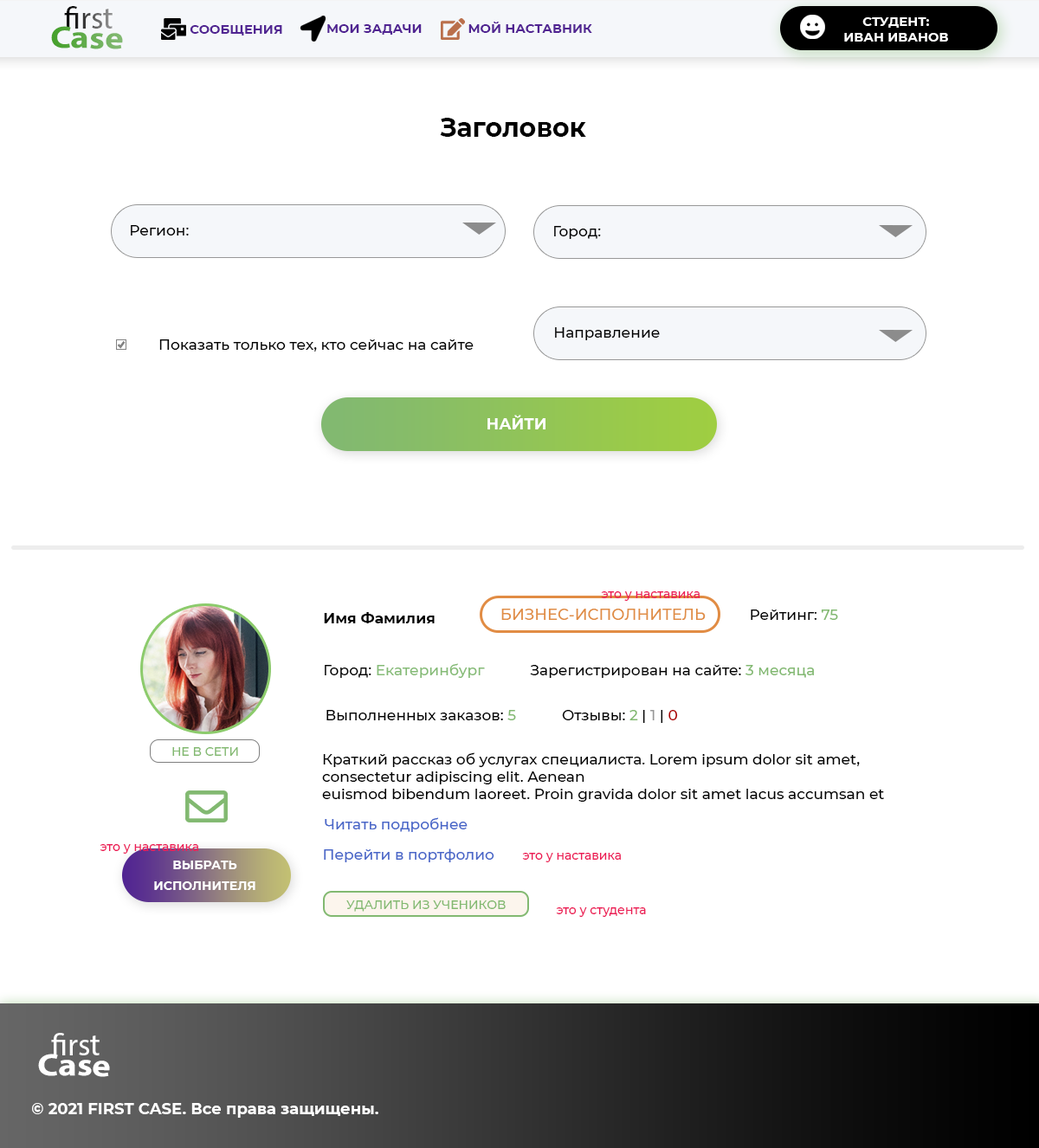
<style>
.page{position:relative;width:1039px;height:1148px;background:#ffffff}
.page>*{position:absolute;margin:0}
.t1{font:31.2px "MyriadPro-Regular"}
.t2{font:12.7px "Montserrat-Bold";color:#ffffff;text-transform:uppercase}
.t3{font:31.2px "MyriadPro-Bold";scale:1.13 1}
.t4{font:31.5px "MyriadPro-Regular";scale:1.13 1}
.t5{font:12.7px "Montserrat-Bold";color:#512592;text-transform:uppercase}
.t6{font:12.7px "Montserrat-Bold";color:#512492;text-transform:uppercase}
.t7{font:26px "Montserrat-Bold";color:#000000}
.t8{font:14.7px "Montserrat-Medium";color:#000000}
.t9{font:15.6px "Montserrat-Bold";color:#ffffff;text-transform:uppercase}
.t10{font:12.1px "Montserrat-Medium";color:#ec1b56}
.t11{font:14.7px "Montserrat-Bold";color:#000000}
.t12{font:15.6px "Montserrat-Medium";color:#e08d44}
.t13{font:14.7px "Montserrat-Medium";color:#82b971}
.t14{font:14.7px "Montserrat-Medium";color:#85bb76}
.t15{font:14.7px "Montserrat-Medium";color:#989898}
.t16{font:14.7px "Montserrat-Medium";color:#ae0000}
.t17{font:12.1px "Montserrat-Medium";color:#82b970}
.t18{font:14.7px "Montserrat-Medium";color:#4866c8}
.t19{font:12.1px/20.8px "Montserrat-Bold";color:#ffffff;text-transform:uppercase}
.t20{font:31.2px "MyriadPro-Regular";color:#ffffff}
.t21{font:31.2px "MyriadPro-Bold";color:#ffffff;scale:1.13 1}
.t22{font:31.2px "MyriadPro-Regular";color:#ffffff;scale:1.13 1}
.t23{font:15.6px "Montserrat-Bold";color:#ffffff}
</style>
<div class="page">
<p class="t1" style="left:64px;top:6px;width:49px;height:23px">first</p>
<p class="t2" style="left:844px;top:17px;width:104px;height:25px;text-align:center">студент:<br>иВАН иВАНОВ</p>
<p class="t3" style="left:51px;top:26px;width:72px;height:23px;rotate:1deg"><span class="t4">       </span>Case</p>
<p class="t5" style="left:190px;top:25px;width:92px;height:10px">СООБЩЕНИЯ</p>
<p class="t6" style="left:327px;top:24px;width:95px;height:11px">МОИ задачи</p>
<p class="t6" style="left:468px;top:22px;width:124px;height:11px">мой наставник</p>
<p class="t7" style="left:440px;top:118px;width:146px;height:19px">Заголовок</p>
<p class="t8" style="left:131px;top:225px;width:58px;height:10px">Регион:</p>
<p class="t8" style="left:554px;top:226px;width:47px;height:13px">Город:</p>
<p class="t8" style="left:555px;top:327px;width:105px;height:13px">Направление</p>
<p class="t8" style="left:159px;top:339px;width:315px;height:12px">Показать только тех, кто сейчас на сайте</p>
<p class="t9" style="left:487px;top:415px;width:58px;height:14px">найти</p>
<p class="t10" style="left:601px;top:591px;width:98px;height:10px">это у наставика</p>
<p class="t11" style="left:324px;top:612px;width:111px;height:11px">Имя Фамилия</p>
<p class="t12" style="left:501px;top:609px;width:205px;height:11px">БИЗНЕС-ИСПОЛНИТЕЛЬ</p>
<p class="t8" style="left:751px;top:609px;width:87px;height:11px">Рейтинг: <span class="t13">75</span></p>
<p class="t14" style="left:325px;top:663px;width:160px;height:15px"><span class="t8">Город: </span>Екатеринбург</p>
<p class="t8" style="left:530px;top:665px;width:284px;height:13px">Зарегистрирован на сайте: <span class="t13">3 месяца</span></p>
<p class="t8" style="left:326px;top:710px;width:190px;height:10px">Выполненных заказов: <span class="t13">5</span></p>
<p class="t8" style="left:562px;top:710px;width:116px;height:13px">Отзывы: <span class="t13">2</span> | <span class="t15">1 </span>| <span class="t16">0</span></p>
<p class="t17" style="left:172px;top:747px;width:66px;height:9px">НЕ В СЕТИ</p>
<p class="t8" style="left:322px;top:752px;width:562px;height:50px">Краткий рассказ об услугах специалиста. Lorem ipsum dolor sit amet, consectetur adipiscing elit. Aenean <br>euismod bibendum laoreet. Proin gravida dolor sit amet lacus accumsan et viverra justo commodo.</p>
<p class="t18" style="left:325px;top:817px;width:142px;height:15px">Читать подробнее</p>
<p class="t10" style="left:100px;top:844px;width:98px;height:10px">это у наставика</p>
<p class="t18" style="left:324px;top:848px;width:170px;height:14px">Перейти в портфолио</p>
<p class="t10" style="left:522px;top:853px;width:99px;height:9px">это у наставика</p>
<p class="t19" style="left:154px;top:860px;width:101px;height:30px;text-align:center">выбрать<br>исполнителя</p>
<p class="t17" style="left:346px;top:900px;width:160px;height:12px">УДАЛИТЬ ИЗ УЧЕНИКОВ</p>
<p class="t10" style="left:556px;top:907px;width:90px;height:10px">это у студента</p>
<p class="t20" style="left:51px;top:1033px;width:49px;height:22px">first</p>
<p class="t21" style="left:38px;top:1054px;width:72px;height:23px;rotate:1deg"><span class="t22">       </span>Case</p>
<p class="t23" style="left:32px;top:1103px;width:346px;height:15px">© 2021 FIRST CASE. Все права защищены.</p>
</div>
